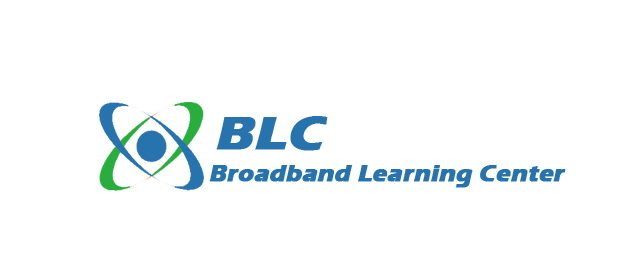
<style>
.page{position:relative;width:634px;height:275px;background:#ffffff}
.page>*{position:absolute;margin:0}
.t1{font:48px "ErasITC-Bold";color:#2773ae;font-weight:bold;font-style:italic;scale:1.11 1}
.t2{font:24px "ErasITC-Bold";color:#2773ae;font-weight:bold;font-style:italic}
</style>
<div class="page">
<p class="t1" style="left:216px;top:116px;width:112px;height:35px">BLC</p>
<p class="t2" style="left:209px;top:165px;width:357px;height:23px">Broadband Learning Center</p>
</div>
